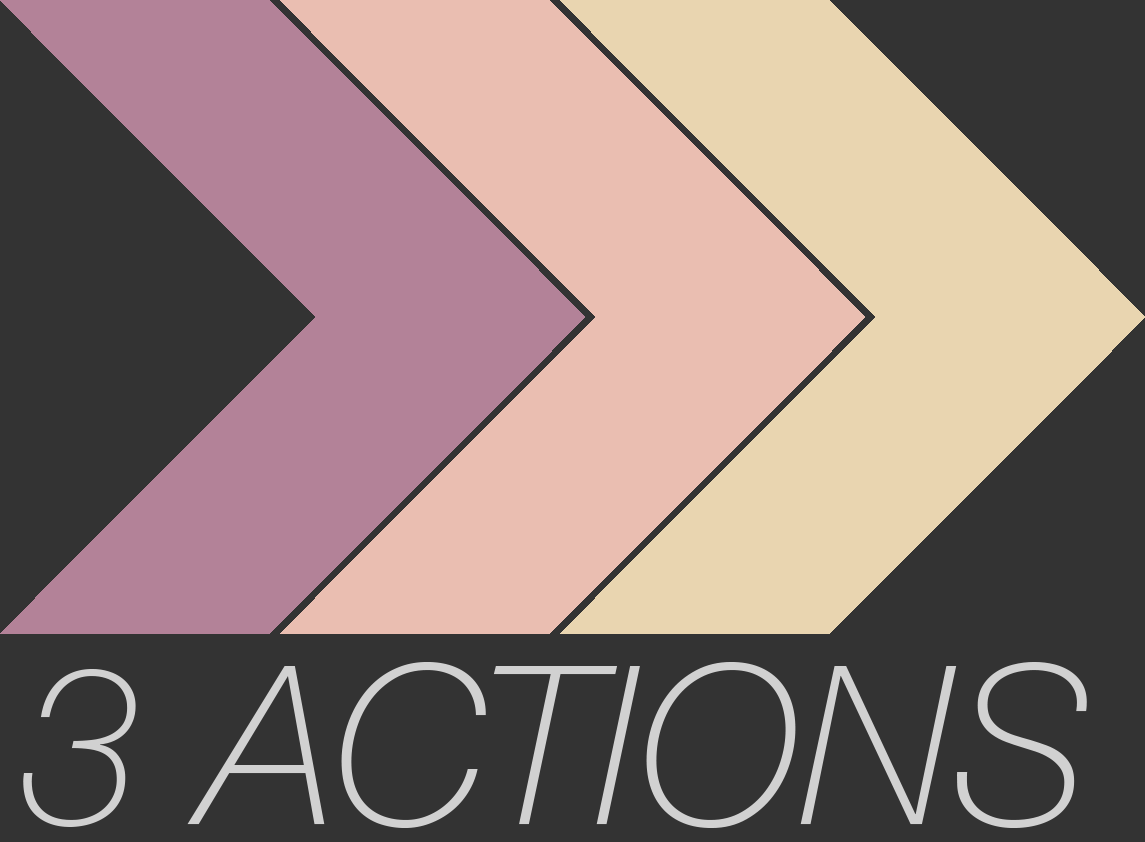
<style>
.page{position:relative;width:1145px;height:842px;background:#333333}
.page>*{position:absolute;margin:0}
.t1{font:220.8px "HelveticaNeue-ThinItalic";color:#d1d1d1}
</style>
<div class="page">
<p class="t1" style="left:23px;top:662px;width:1064px;height:166px">3 ACTIONS</p>
</div>
